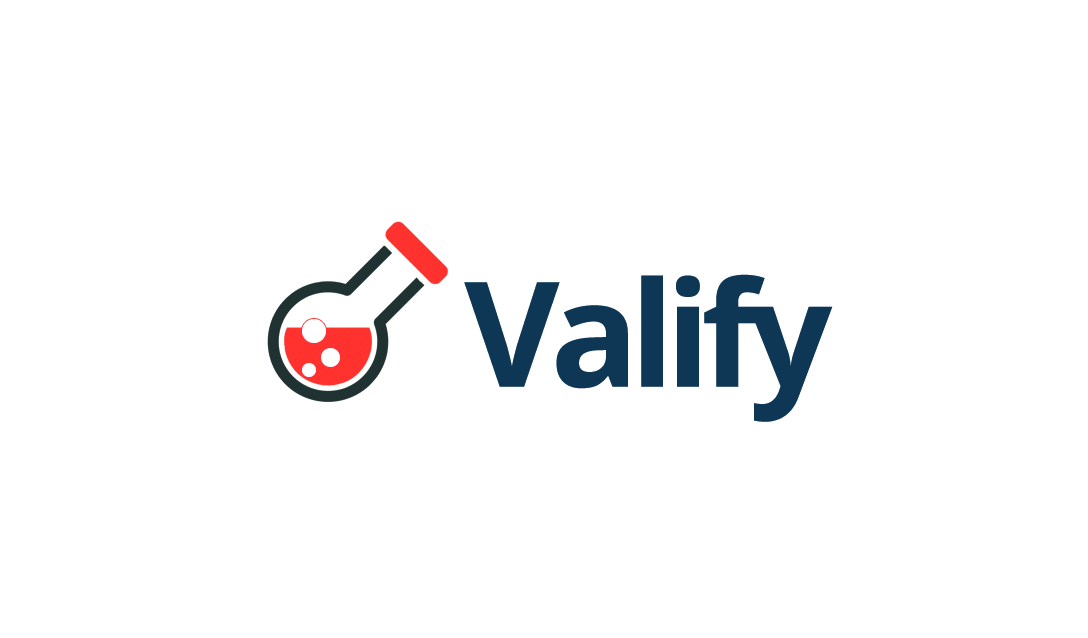
<style>
.page{position:relative;width:1088px;height:638px;background:#ffffff}
.page>*{position:absolute;margin:0}
.t1{font:145.9px "OpenSans-Bold";letter-spacing:-0.06em;color:#0f3655}
</style>
<div class="page">
<p class="t1" style="left:464px;top:274px;width:369px;height:148px">Valify</p>
</div>
